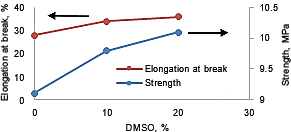
<style>
.page{position:relative;width:291px;height:132px;background:#ffffff}
.page>*{position:absolute;margin:0}
.t1{font:9.3px "ArialMT"}
.t2{font:9.3px/23.3px "ArialMT";color:#000000}
.t3{font:9.3px/30.7px "ArialMT";color:#000000}
.t4{font:9.3px "ArialMT";color:#000000}
.t5{font:9.3px/13.3px "ArialMT";color:#000000}
</style>
<div class="page">
<p class="t1" style="left:0px;top:4px;width:10px;height:97px;rotate:-90deg">Elongation at break, %</p>
<p class="t2" style="left:14px;top:4px;width:10px;height:100px;text-align:right">40<br>30<br>20<br>10<br>0</p>
<p class="t3" style="left:260px;top:4px;width:18px;height:99px">10.5<br>10<br>9.5<br>9</p>
<p class="t4" style="left:281px;top:24px;width:10px;height:62px;rotate:-90deg">Strength, MPa</p>
<p class="t5" style="left:145px;top:65px;width:82px;height:23px">Elongation at break<br>Strength</p>
<p class="t4" style="left:32px;top:109px;width:5px;height:7px">0</p>
<p class="t4" style="left:103px;top:109px;width:9px;height:7px">10</p>
<p class="t4" style="left:173px;top:109px;width:10px;height:7px">20</p>
<p class="t4" style="left:244px;top:109px;width:10px;height:7px">30</p>
<p class="t4" style="left:126px;top:124px;width:43px;height:8px">DMSO, %</p>
</div>
